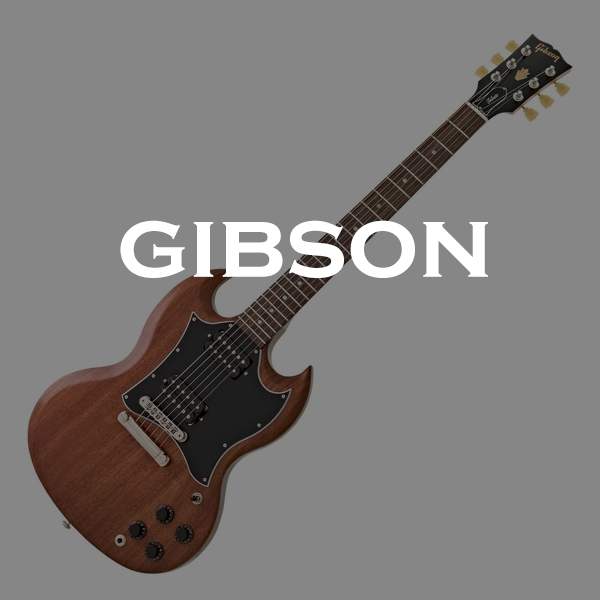
<style>
.page{position:relative;width:600px;height:600px;background:#868686}
.page>*{position:absolute;margin:0}
.t1{font:100px "CopperplateGothic-Bold";color:#ffffff}
</style>
<div class="page">
<p class="t1" style="left:120px;top:220px;width:368px;height:58px">gibson</p>
</div>
